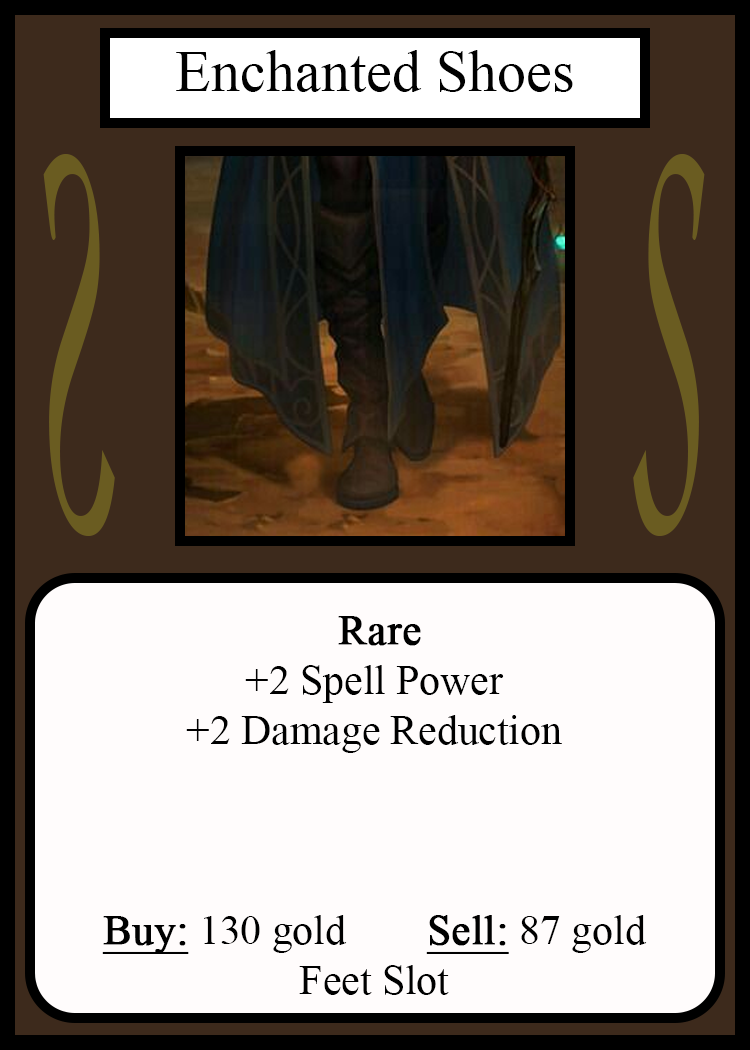
<style>
.page{position:relative;width:750px;height:1050px;background:#fffcfc}
.page>*{position:absolute;margin:0}
.t1{font:58.3px "TimesNewRomanPSMT";color:#010101}
.t2{font:548.5px "Apple-Chancery";color:#6a5c21;scale:0.27 1}
.t3{font:548.2px "Apple-Chancery";color:#6a5c21;scale:0.27 1}
.t4{font:41.7px "TimesNewRomanPSMT";color:#000000}
.t5{font:41.7px "TimesNewRomanPSMT";color:#000000;font-weight:bold}
.t6{font:41.7px "TimesNewRomanPSMT";color:#000000;font-weight:bold;text-decoration:underline}
</style>
<div class="page">
<p class="t1" style="left:176px;top:50px;width:397px;height:42px">Enchanted Shoes</p>
<p class="t2" style="left:43px;top:154px;width:72px;height:382px;rotate:180deg">S</p>
<p class="t3" style="left:633px;top:154px;width:72px;height:382px">S</p>
<p class="t4" style="left:102px;top:616px;width:545px;height:379px;text-align:center"><span class="t5"> Rare</span><br>+2 Spell Power<br>+2 Damage Reduction<br><br><br><br><span class="t6">Buy:</span> 130 gold   <span class="t6">Sell:</span> 87 gold<br>Feet Slot</p>
</div>
